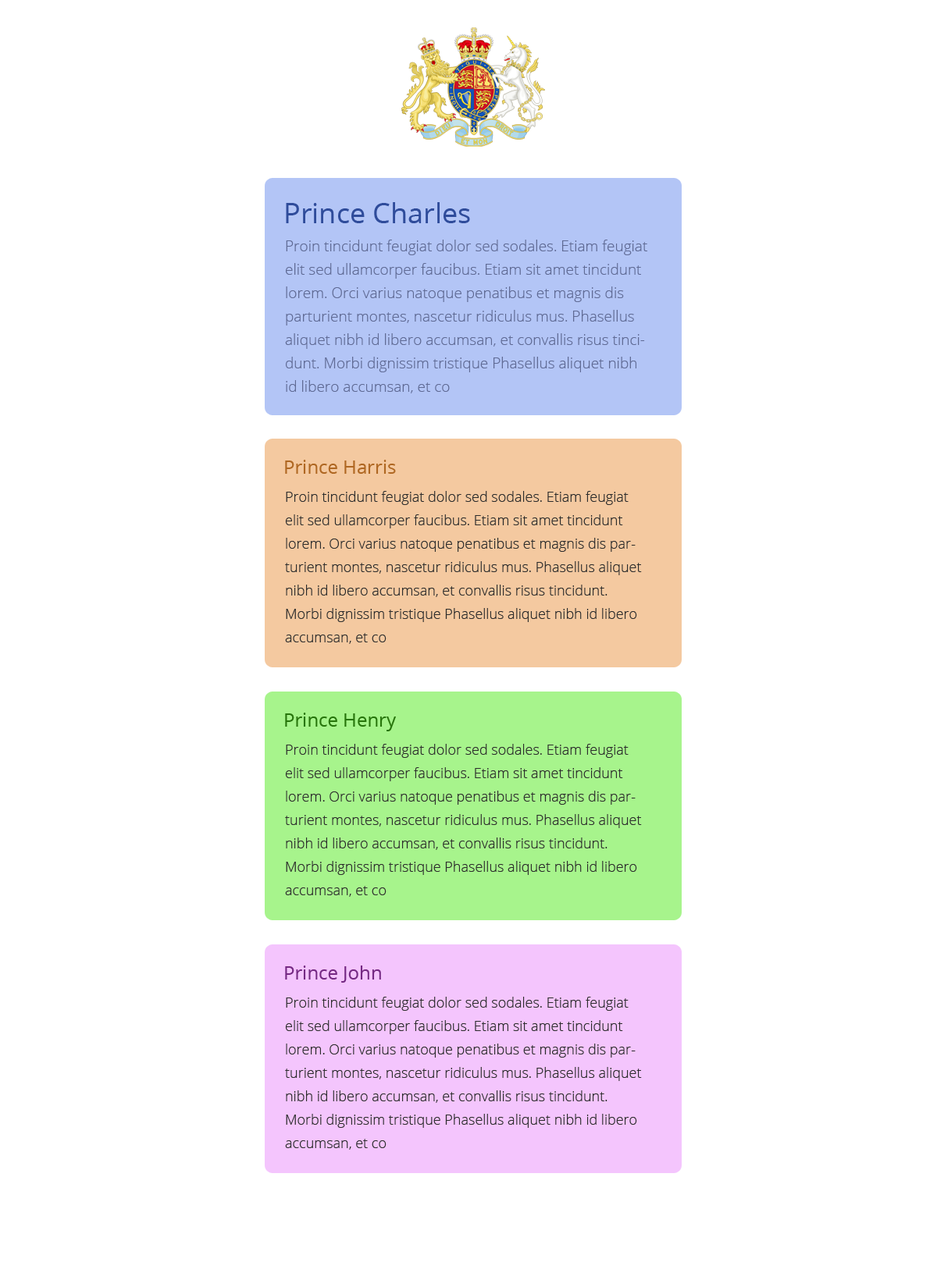
<style>
.page{position:relative;width:937px;height:1273px;background:#ffffff}
.page>*{position:absolute;margin:0}
.t1{font:28.1px "OpenSans";color:#2f4c9b}
.t2{font:14.8px/23.4px "OpenSans-Light";color:#5f6a94}
.t3{font:18.7px "OpenSans";color:#af6722}
.t4{font:14.1px/23.4px "OpenSans-Light";color:#2b2b2b}
.t5{font:18.7px "OpenSans";color:#27750b}
.t6{font:18.7px "OpenSans";color:#752983}
</style>
<div class="page">
<p class="t1" style="left:286px;top:202px;width:184px;height:21px">Prince Charles</p>
<p class="t2" style="left:285px;top:240px;width:362px;height:153px">Proin tincidunt feugiat dolor sed sodales. Etiam feugiat elit sed ullamcorper faucibus. Etiam sit amet tincidunt lorem. Orci varius natoque penatibus et magnis dis parturient montes, nascetur ridiculus mus. Phasellus aliquet nibh id libero accumsan, et convallis risus tincidunt. Morbi dignissim tristique Phasellus aliquet nibh id libero accumsan, et co</p>
<p class="t3" style="left:285px;top:460px;width:111px;height:14px">Prince Harris</p>
<p class="t4" style="left:285px;top:491px;width:357px;height:153px">Proin tincidunt feugiat dolor sed sodales. Etiam feugiat elit sed ullamcorper faucibus. Etiam sit amet tincidunt lorem. Orci varius natoque penatibus et magnis dis parturient montes, nascetur ridiculus mus. Phasellus aliquet nibh id libero accumsan, et convallis risus tincidunt. Morbi dignissim tristique Phasellus aliquet nibh id libero accumsan, et co</p>
<p class="t5" style="left:285px;top:713px;width:111px;height:18px">Prince Henry</p>
<p class="t4" style="left:285px;top:744px;width:357px;height:153px">Proin tincidunt feugiat dolor sed sodales. Etiam feugiat elit sed ullamcorper faucibus. Etiam sit amet tincidunt lorem. Orci varius natoque penatibus et magnis dis parturient montes, nascetur ridiculus mus. Phasellus aliquet nibh id libero accumsan, et convallis risus tincidunt. Morbi dignissim tristique Phasellus aliquet nibh id libero accumsan, et co</p>
<p class="t6" style="left:285px;top:966px;width:96px;height:17px">Prince John</p>
<p class="t4" style="left:285px;top:997px;width:357px;height:153px">Proin tincidunt feugiat dolor sed sodales. Etiam feugiat elit sed ullamcorper faucibus. Etiam sit amet tincidunt lorem. Orci varius natoque penatibus et magnis dis parturient montes, nascetur ridiculus mus. Phasellus aliquet nibh id libero accumsan, et convallis risus tincidunt. Morbi dignissim tristique Phasellus aliquet nibh id libero accumsan, et co</p>
</div>
